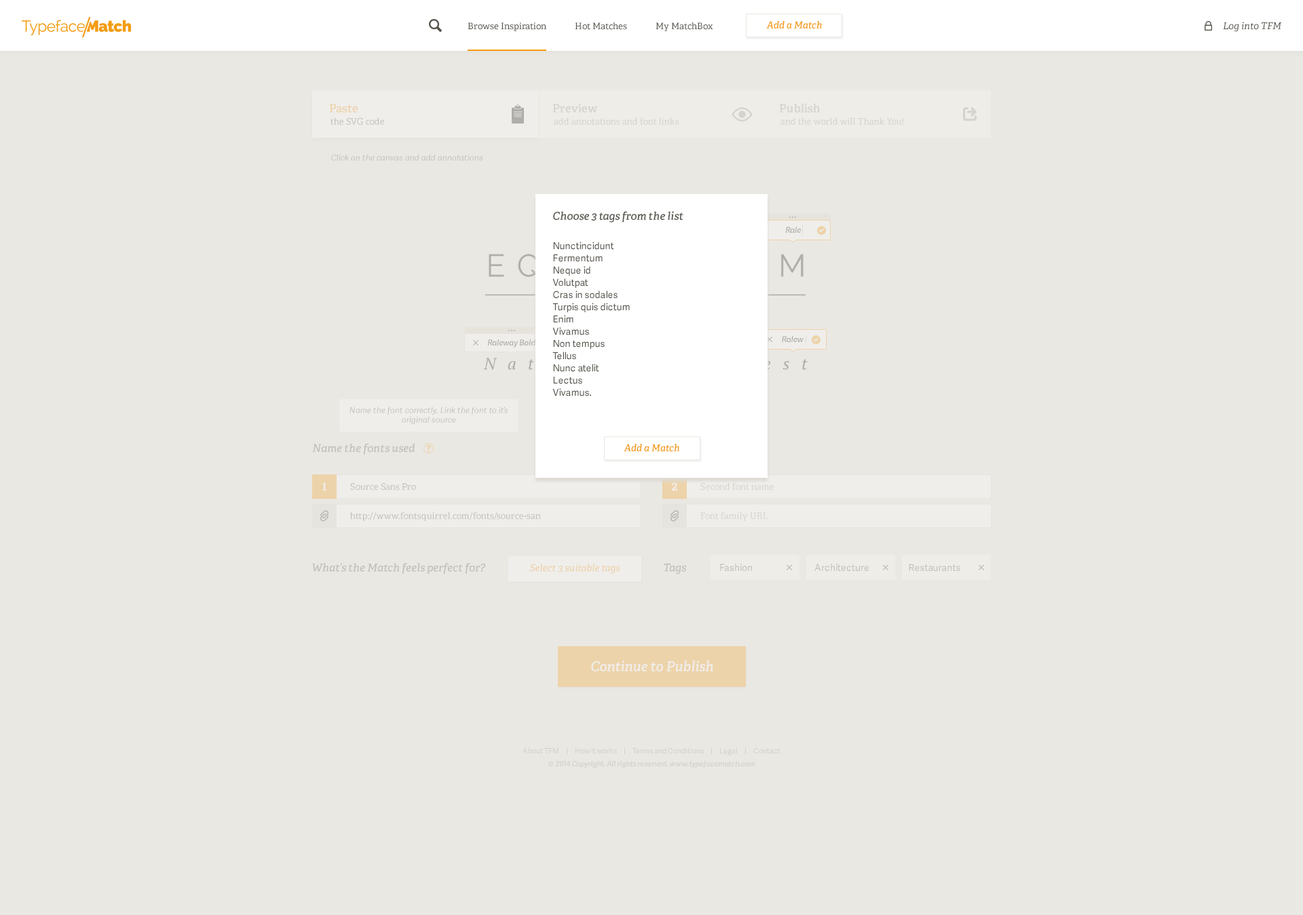
<style>
.page{position:relative;width:1303px;height:915px;background:#eae8e3}
.page>*{position:absolute;margin:0}
.t1{font:8.8px "Adelle-Regular";color:#58554d}
.t2{font:9.5px "Adelle-SemiBoldItalic";color:#f39c12}
.t3{font:9.5px "Adelle-Italic";color:#58554d}
.t4{font:11.5px "Adelle-SemiBold";color:#edd3a9}
.t5{font:11.5px "Adelle-SemiBold";color:#d5d3cc}
.t6{font:8.8px "Adelle-Regular";color:#c1bfb9}
.t7{font:8.8px "Adelle-Regular";color:#d5d3cc}
.t8{font:8.1px "AdelleSans-Italic";color:#c1bfb9}
.t9{font:10.9px "Adelle-SemiBoldItalic";color:#58554d}
.t10{font:8.1px "AdelleSans-SemiBoldItalic";color:#afaeaa}
.t11{font:9.5px/12.2px "AdelleSans";color:#58554d}
.t12{font:8.1px/9.5px "AdelleSans-Italic";color:#c1bfb9}
.t13{font:10.9px "Adelle-SemiBoldItalic";color:#c1bfb9}
.t14{font:12.9px "Adelle-SemiBold";color:#ffffff}
.t15{font:8.8px "Adelle-Regular";color:#d5d3ce}
.t16{font:9.5px "Adelle-SemiBoldItalic";color:#edd3a9}
.t17{font:9.5px "AdelleSans";color:#c1bfb9}
.t18{font:13.6px "Adelle-SemiBoldItalic";color:#ffffff}
.t19{font:7.5px "AdelleSans";color:#d3d1cb}
.t20{font:7.5px "AdelleSans-SemiBoldItalic";color:#d3d1cb}
</style>
<div class="page">
<p class="t1" style="left:468px;top:22px;width:245px;height:9px">Browse Inspiration              Hot Matches              My MatchBox</p>
<p class="t2" style="left:766px;top:21px;width:56px;height:8px">Add a Match</p>
<p class="t3" style="left:1223px;top:22px;width:59px;height:10px">Log into TFM</p>
<p class="t4" style="left:329px;top:104px;width:29px;height:9px">Paste</p>
<p class="t5" style="left:553px;top:103px;width:45px;height:10px">Preview</p>
<p class="t5" style="left:779px;top:103px;width:42px;height:10px">Publish</p>
<p class="t6" style="left:331px;top:117px;width:53px;height:8px">the SVG code</p>
<p class="t7" style="left:554px;top:117px;width:125px;height:8px">add annotations and font links</p>
<p class="t7" style="left:781px;top:117px;width:123px;height:8px">and the world will Thank You!</p>
<p class="t8" style="left:331px;top:154px;width:152px;height:7px">Click on the canvas and add annotations</p>
<p class="t9" style="left:553px;top:211px;width:131px;height:12px">Choose 3 tags from the list</p>
<p class="t10" style="left:785px;top:227px;width:17px;height:6px">Rale</p>
<p class="t11" style="left:553px;top:242px;width:77px;height:154px">Nunctincidunt<br>Fermentum<br>Neque id<br>Volutpat<br>Cras in sodales<br>Turpis quis dictum<br>Enim<br>Vivamus<br>Non tempus<br>Tellus<br>Nunc atelit<br>Lectus<br>Vivamus.</p>
<p class="t10" style="left:487px;top:339px;width:49px;height:9px">Raleway Bold</p>
<p class="t10" style="left:782px;top:336px;width:22px;height:6px">Ralew</p>
<p class="t12" style="left:350px;top:407px;width:158px;height:17px;text-align:center">Name the font correctly. Link the font to it’s<br>original source</p>
<p class="t13" style="left:312px;top:443px;width:103px;height:12px">Name the fonts used</p>
<p class="t2" style="left:624px;top:444px;width:55px;height:7px">Add a Match</p>
<p class="t14" style="left:322px;top:483px;width:5px;height:8px">1</p>
<p class="t6" style="left:350px;top:483px;width:66px;height:7px">Source Sans Pro</p>
<p class="t14" style="left:671px;top:483px;width:6px;height:8px">2</p>
<p class="t15" style="left:700px;top:483px;width:74px;height:7px">Second font name</p>
<p class="t6" style="left:350px;top:512px;width:191px;height:9px">http://www.fontsquirrel.com/fonts/source-san</p>
<p class="t15" style="left:700px;top:512px;width:68px;height:9px">Font family URL</p>
<p class="t13" style="left:312px;top:563px;width:174px;height:11px">What’s the Match feels perfect for?</p>
<p class="t16" style="left:529px;top:563px;width:91px;height:11px">Select 3 suitable tags</p>
<p class="t13" style="left:664px;top:563px;width:23px;height:11px">Tags</p>
<p class="t17" style="left:720px;top:563px;width:32px;height:9px">Fashion</p>
<p class="t17" style="left:815px;top:563px;width:54px;height:9px">Architecture</p>
<p class="t17" style="left:909px;top:564px;width:51px;height:8px">Restaurants</p>
<p class="t18" style="left:591px;top:660px;width:122px;height:11px">Continue to Publish</p>
<p class="t19" style="left:523px;top:747px;width:258px;height:8px">About TFM     |     How it works     |     Terms and Conditions     |     Legal     |     Contact</p>
<p class="t20" style="left:548px;top:760px;width:207px;height:8px">© 2014 Copyright. All rights reserved. www.typefacematch.com</p>
</div>
